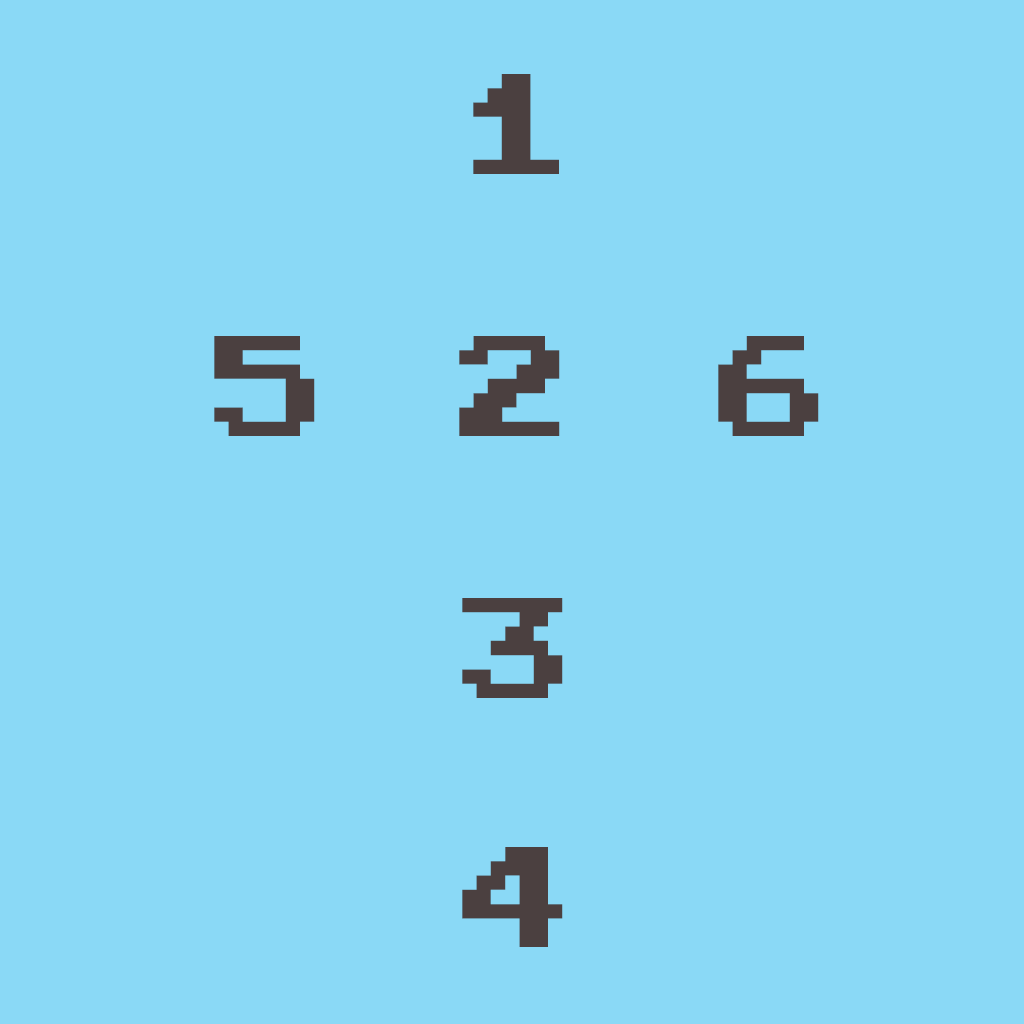
<style>
.page{position:relative;width:1024px;height:1024px;background:#8ad9f6}
.page>*{position:absolute;margin:0}
.t1{font:100px "Ice-Hockey";color:#4b4040}
</style>
<div class="page">
<p class="t1" style="left:473px;top:74px;width:86px;height:100px">1</p>
<p class="t1" style="left:214px;top:336px;width:101px;height:100px">5</p>
<p class="t1" style="left:459px;top:336px;width:101px;height:100px">2</p>
<p class="t1" style="left:718px;top:336px;width:101px;height:100px">6</p>
<p class="t1" style="left:462px;top:598px;width:101px;height:100px">3</p>
<p class="t1" style="left:462px;top:847px;width:101px;height:100px">4</p>
</div>
